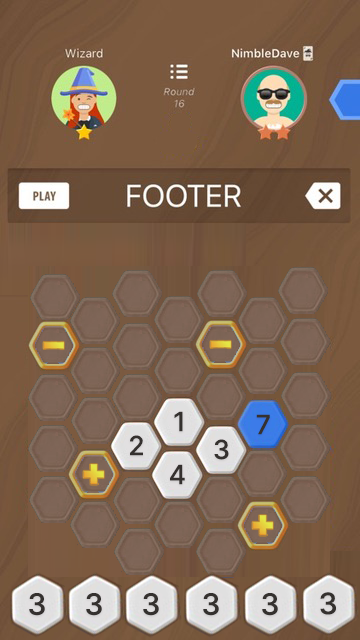
<style>
.page{position:relative;width:360px;height:640px}
.page>*{position:absolute;margin:0}
.t1{font:26.3px "Inter-Medium";letter-spacing:0.01em;color:#35312f;font-variant:small-caps}
.t2{font:29.5px "Inter-Medium";letter-spacing:0.01em;color:#35312f;font-variant:small-caps}
</style>
<div class="page">
<p class="t1" style="left:174px;top:411px;width:9px;height:21px">1</p>
<p class="t1" style="left:256px;top:414px;width:14px;height:21px">7</p>
<p class="t1" style="left:130px;top:435px;width:13px;height:21px">2</p>
<p class="t1" style="left:214px;top:439px;width:15px;height:21px">3</p>
<p class="t1" style="left:170px;top:464px;width:15px;height:21px">4</p>
<p class="t2" style="left:29px;top:593px;width:16px;height:23px">3</p>
<p class="t2" style="left:86px;top:593px;width:16px;height:23px">3</p>
<p class="t2" style="left:143px;top:593px;width:16px;height:23px">3</p>
<p class="t2" style="left:203px;top:593px;width:16px;height:23px">3</p>
<p class="t2" style="left:262px;top:593px;width:16px;height:23px">3</p>
<p class="t2" style="left:320px;top:592px;width:16px;height:23px;rotate:-2deg">3</p>
</div>
